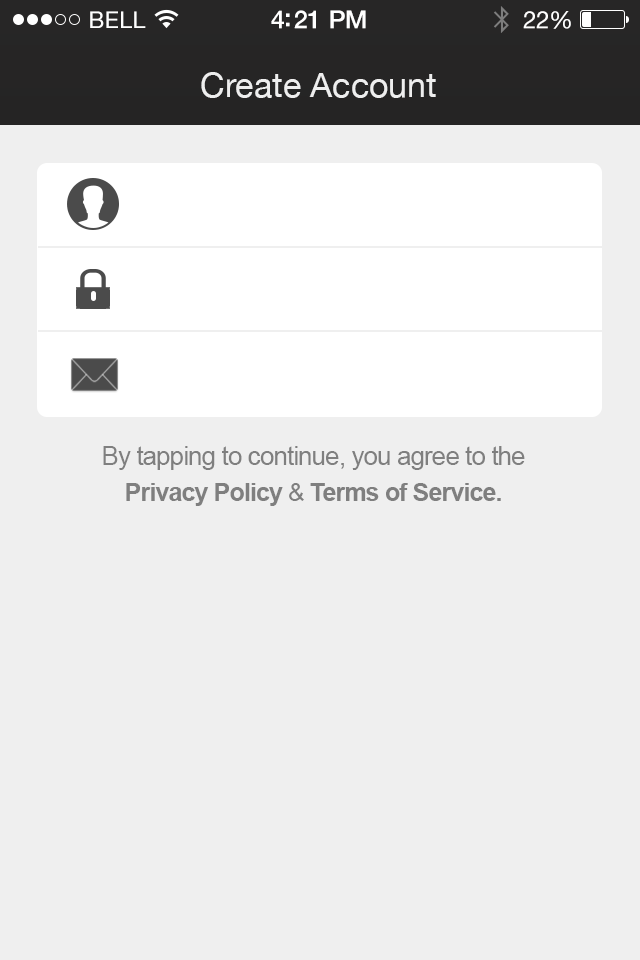
<style>
.page{position:relative;width:640px;height:960px;background:#efefef}
.page>*{position:absolute;margin:0}
.t1{font:23px "HelveticaNeue";letter-spacing:0.02em;color:#ffffff}
.t2{font:25px "HelveticaNeue-Medium";letter-spacing:-0.02em;color:#ffffff}
.t3{font:24px "HelveticaNeue";letter-spacing:-0.02em;color:#ffffff}
.t4{font:34px "HelveticaNeue";color:#eeeeee}
.t5{font:26px/36px "ArialMT";letter-spacing:-0.035em;color:#7f7f7f}
.t6{font:25px/36px "Arial-BoldMT";letter-spacing:-0.035em;color:#7f7f7f}
.t7{font:25px/36px "ArialMT";letter-spacing:-0.035em;color:#7f7f7f}
</style>
<div class="page">
<p class="t1" style="left:90px;top:11px;width:56px;height:17px">BELL</p>
<p class="t2" style="left:271px;top:10px;width:95px;height:19px">4:21 PM</p>
<p class="t3" style="left:523px;top:11px;width:48px;height:18px">22%</p>
<p class="t4" style="left:201px;top:72px;width:235px;height:26px">Create Account</p>
<p class="t5" style="left:103px;top:446px;width:422px;height:60px;text-align:center">By tapping to continue, you agree to the <span class="t6">Privacy Policy</span><span class="t7"> &amp; </span><span class="t6">Terms of Service.</span></p>
</div>
